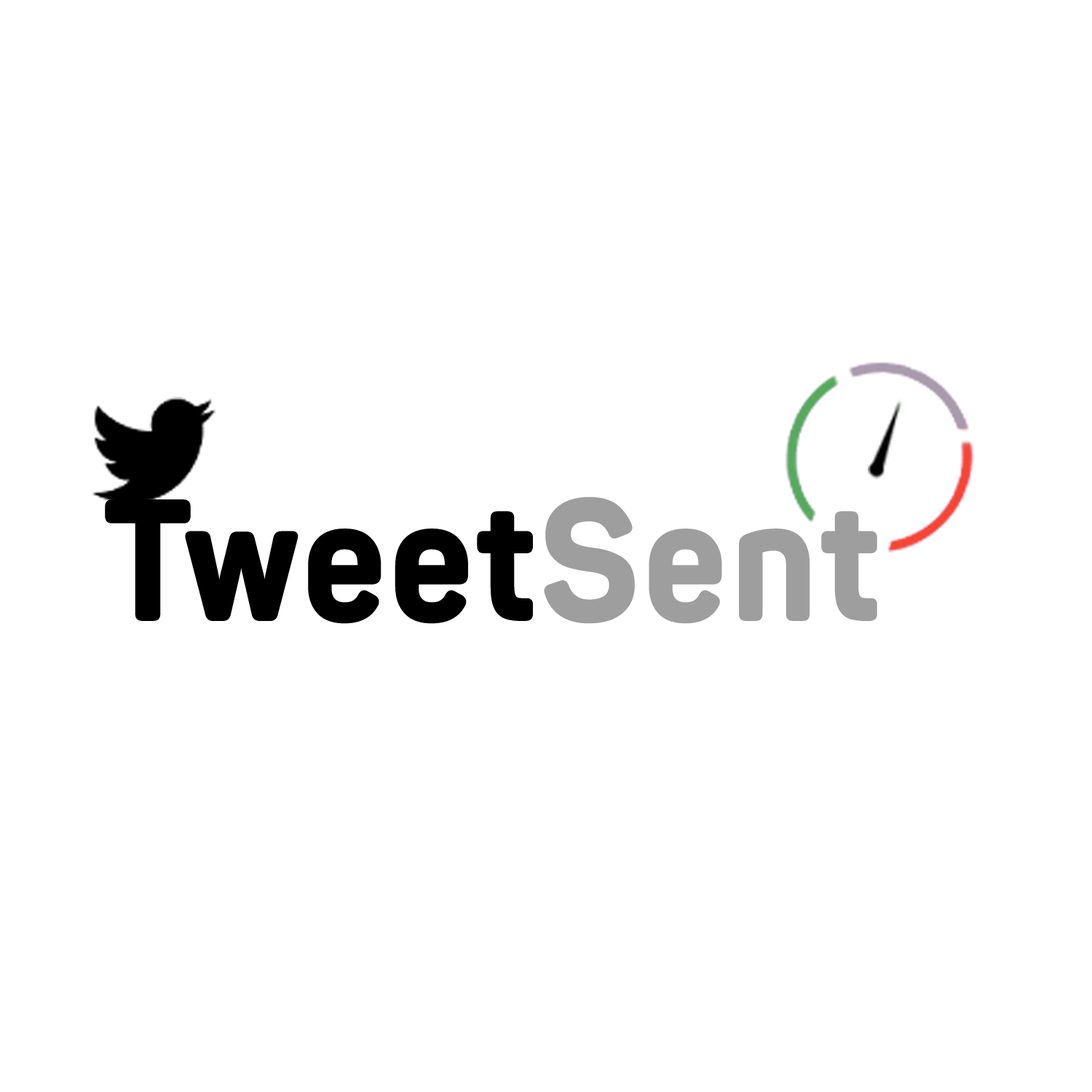
<style>
.page{position:relative;width:1092px;height:1092px;background:#ffffff}
.page>*{position:absolute;margin:0}
.t1{font:164.5px "PantonNarrow-Trial-Bold";color:#000000;font-weight:bold}
.t2{font:164.5px "PantonNarrow-Trial-Bold";color:#9e9e9e;font-weight:bold}
</style>
<div class="page">
<p class="t1" style="left:105px;top:496px;width:772px;height:128px">Tweet<span class="t2">Sent</span></p>
</div>
